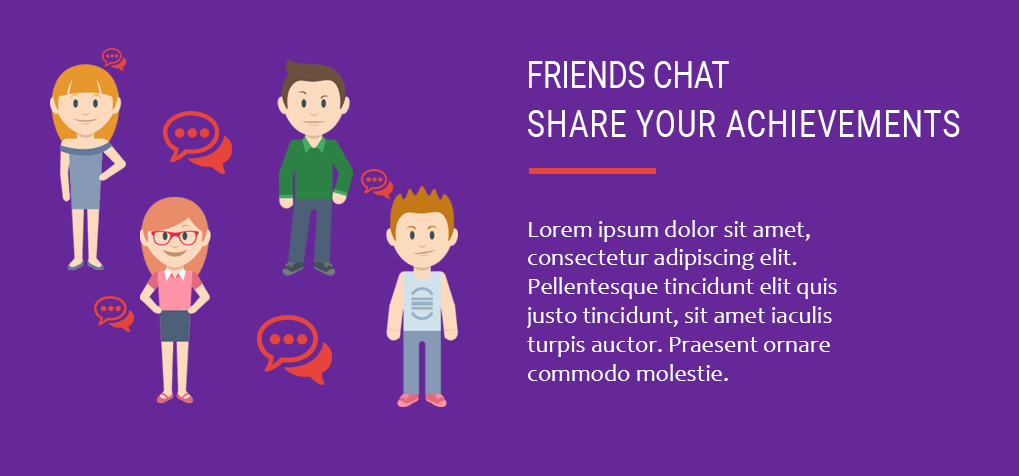
<style>
.page{position:relative;width:1019px;height:476px;background:#662899}
.page>*{position:absolute;margin:0}
.t1{font:37.5px "Roboto-Regular";color:#ffffff;text-transform:uppercase;scale:0.8 1}
.t2{font:37.5px "Roboto-Regular";letter-spacing:0.04em;color:#ffffff;text-transform:uppercase;scale:0.8 1}
.t3{font:24px "Candara";color:#ffffff}
</style>
<div class="page">
<p class="t1" style="left:529px;top:61px;width:200px;height:27px">Friends chat</p>
<p class="t2" style="left:528px;top:110px;width:432px;height:27px">share your achievements</p>
<p class="t3" style="left:527px;top:220px;width:310px;height:161px">Lorem ipsum dolor sit amet, consectetur adipiscing elit. Pellentesque tincidunt elit quis justo tincidunt, sit amet iaculis turpis auctor. Praesent ornare commodo molestie.</p>
</div>
